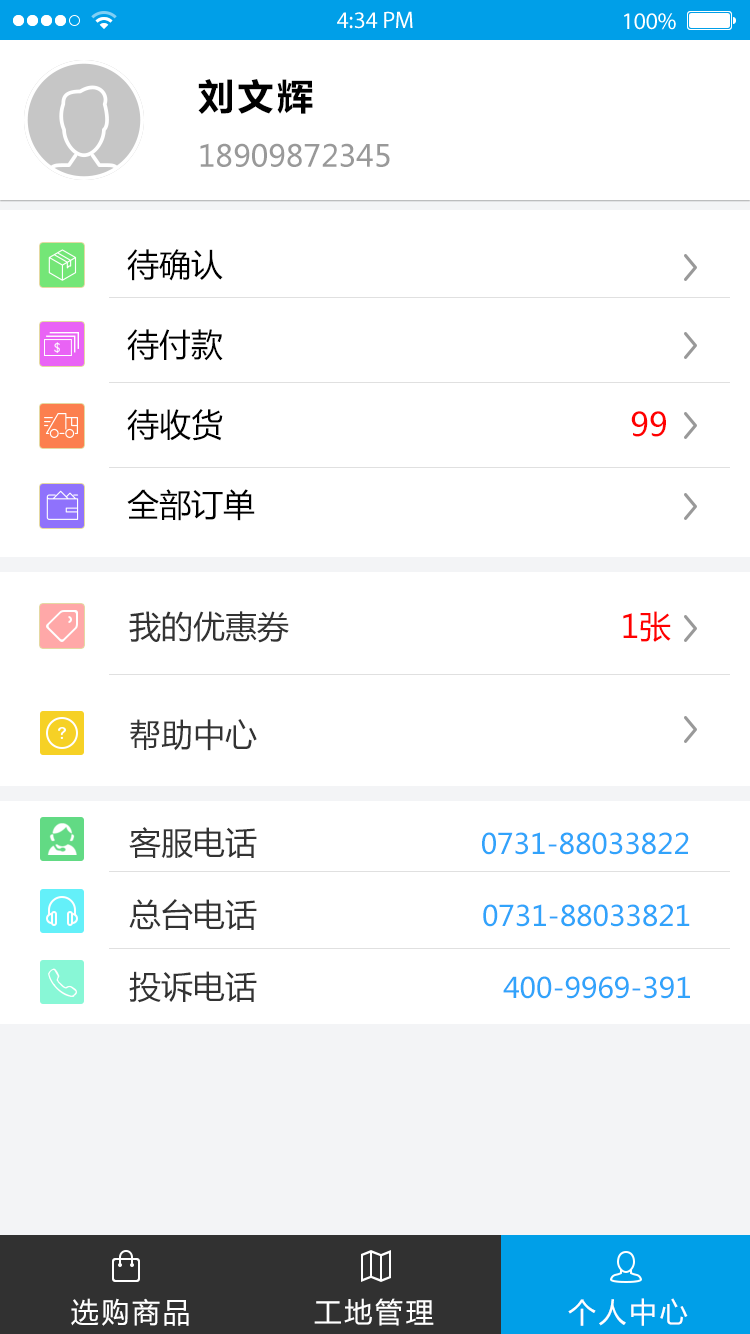
<style>
.page{position:relative;width:750px;height:1334px;background:#ffffff}
.page>*{position:absolute;margin:0}
.t1{font:30px "MicrosoftYaHei";color:#999999}
.t2{font:36px "MicrosoftYaHei-Bold";letter-spacing:0.1em;color:#000000}
.t3{font:32px/80px "MicrosoftYaHei";color:#000000}
.t4{font:32px/36px "MicrosoftYaHei";color:#ff0000}
.t5{font:28px/36px "MicrosoftYaHei";color:#31a3fb}
.t6{font:32px/36px "MicrosoftYaHei";color:#333333}
.t7{font:28px "MicrosoftYaHei";letter-spacing:0.1em;color:#ffffff}
</style>
<div class="page">
<p class="t1" style="left:198px;top:79px;width:192px;height:88px"><span class="t2">刘文辉<br></span>18909872345</p>
<p class="t3" style="left:127px;top:249px;width:539px;height:272px">待确认<br>待付款<br>待收货                                           <span class="t4">99<br></span>全部订单</p>
<p class="t5" style="left:129px;top:611px;width:561px;height:392px"><span class="t6">我的优惠券                                   </span><span class="t4">1张<br></span><span class="t6"><br><br>帮助中心<br><br><br>客服电话                           </span>0731-88033822<br><br><span class="t6">总台电话                           </span>0731-88033821<br><br><span class="t6">投诉电话                             </span>400-9969-391</p>
<p class="t7" style="left:71px;top:1298px;width:617px;height:28px">选购商品           工地管理            个人中心</p>
</div>
